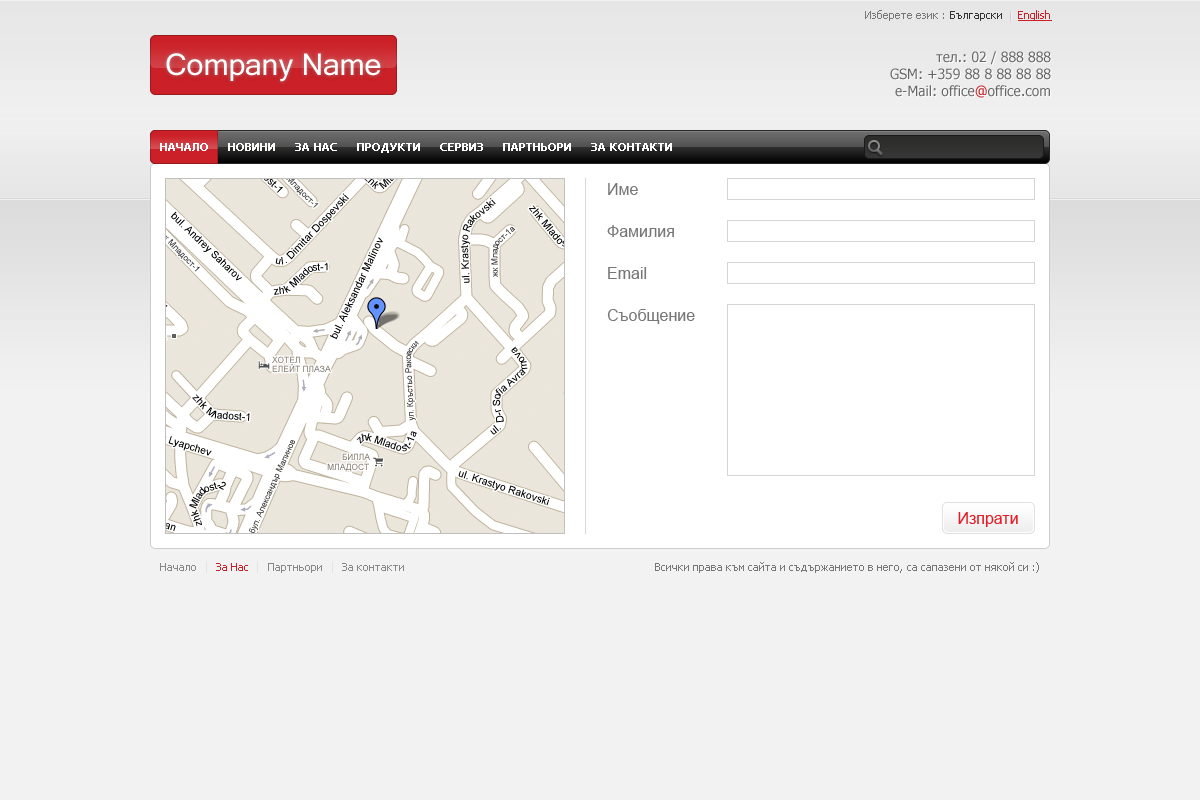
<style>
.page{position:relative;width:1200px;height:800px;background:#f2f2f2}
.page>*{position:absolute;margin:0}
.t1{font:11px "Tahoma";color:#777777}
.t2{font:11px "Tahoma";color:#333333}
.t3{font:11px "Tahoma";color:#cb2027;text-decoration:underline}
.t4{font:30px "MicrosoftSansSerif";color:#ffffff}
.t5{font:14px "Tahoma";color:#666666}
.t6{font:14px "Tahoma";color:#cb2027}
.t7{font:11px "Tahoma";color:#ffffff;text-transform:uppercase;font-weight:bold}
.t8{font:11px "Tahoma";color:#fafaf6;text-transform:uppercase;font-weight:bold}
.t9{font:16px "ArialMT";color:#777777}
.t10{font:16px "ArialMT";color:#e41e26}
.t11{font:11px "Tahoma";color:#888888}
.t12{font:11px "Tahoma";color:#cb2027}
</style>
<div class="page">
<p class="t1" style="left:865px;top:10px;width:79px;height:11px">Изберете език :</p>
<p class="t2" style="left:950px;top:11px;width:52px;height:10px">Български</p>
<p class="t3" style="left:1018px;top:10px;width:34px;height:11px">English</p>
<p class="t4" style="left:166px;top:53px;width:215px;height:29px">Company Name</p>
<p class="t5" style="left:890px;top:51px;width:161px;height:47px;text-align:right">тел.: 02 / 888 888<br>GSM: +359 88 8 88 88 88<br>e-Mail: office<span class="t6">@</span>office.com</p>
<p class="t7" style="left:160px;top:143px;width:48px;height:8px">Нaчало</p>
<p class="t8" style="left:228px;top:143px;width:47px;height:8px">Новини</p>
<p class="t7" style="left:295px;top:143px;width:42px;height:8px">ЗА НАС</p>
<p class="t7" style="left:357px;top:143px;width:63px;height:10px">ПРОДУКТИ</p>
<p class="t7" style="left:440px;top:143px;width:43px;height:8px">СЕРВИЗ</p>
<p class="t7" style="left:503px;top:143px;width:68px;height:8px">ПАРТНЬОРИ</p>
<p class="t7" style="left:591px;top:143px;width:81px;height:8px">ЗА КОНТАКТИ</p>
<p class="t9" style="left:608px;top:183px;width:30px;height:12px">Име</p>
<p class="t9" style="left:607px;top:225px;width:67px;height:12px">Фамилия</p>
<p class="t9" style="left:608px;top:267px;width:39px;height:12px">Еmail</p>
<p class="t9" style="left:607px;top:309px;width:88px;height:15px">Съобщение</p>
<p class="t10" style="left:958px;top:512px;width:60px;height:15px">Изпрати</p>
<p class="t11" style="left:160px;top:563px;width:36px;height:8px">Начало</p>
<p class="t12" style="left:216px;top:563px;width:32px;height:8px">За Нас</p>
<p class="t11" style="left:268px;top:563px;width:54px;height:10px">Партньори</p>
<p class="t11" style="left:342px;top:563px;width:62px;height:8px">За контакти</p>
<p class="t1" style="left:655px;top:562px;width:384px;height:11px">Всички права към сайта и съдържанието в него, са сапазени от някой си :)</p>
</div>
